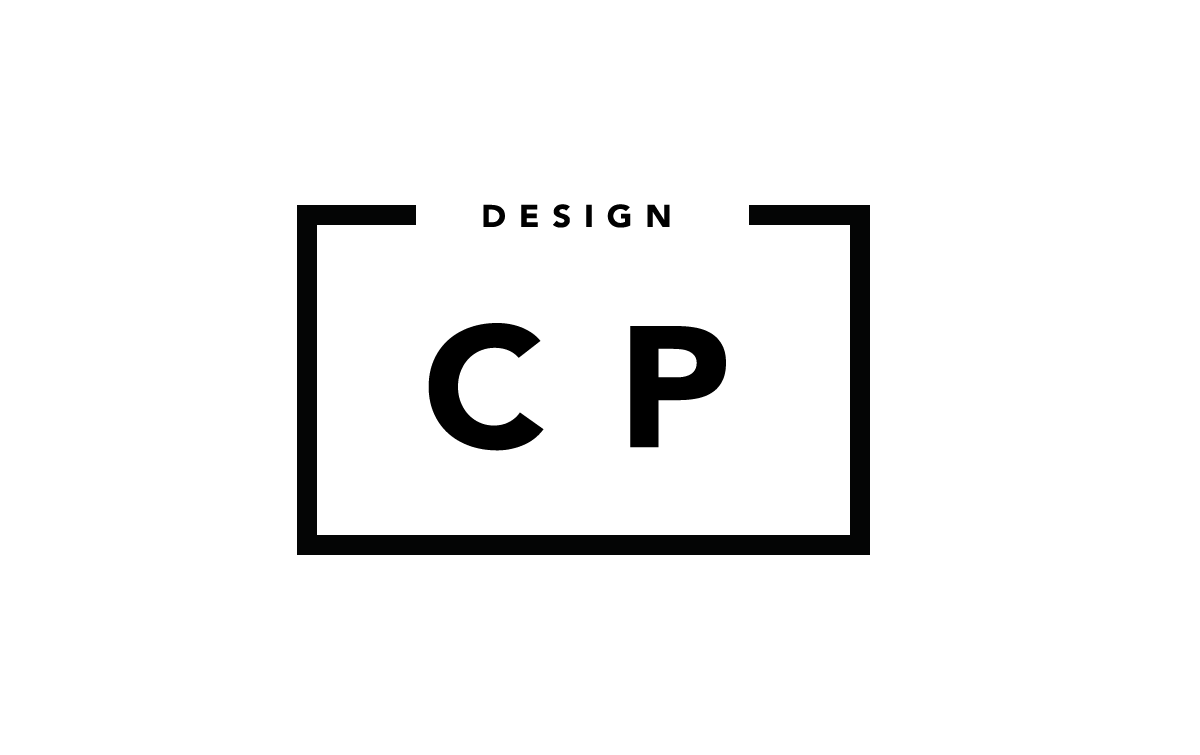
<style>
.page{position:relative;width:1200px;height:755px;background:#ffffff}
.page>*{position:absolute;margin:0}
.t1{font:31px "Avenir-Black";letter-spacing:0.4em;color:#000000;text-transform:uppercase;scale:1.05 1}
.t2{font:170.9px "Avenir-Black";letter-spacing:0.4em;color:#000000;text-transform:uppercase;scale:1.05 1}
.t3{font:170.9px "Avenir-Black";letter-spacing:0.4em;color:#000000;scale:1.05 1}
</style>
<div class="page">
<p class="t1" style="left:483px;top:204px;width:187px;height:24px">DESIGN</p>
<p class="t2" style="left:428px;top:323px;width:298px;height:128px">C<span class="t3">P</span></p>
</div>
